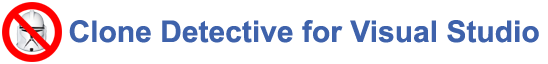
<style>
.page{position:relative;width:548px;height:64px;background:#ffffff}
.page>*{position:absolute;margin:0}
.t1{font:30px "Arial-BoldMT";color:#3e62ab}
</style>
<div class="page">
<p class="t1" style="left:69px;top:20px;width:470px;height:23px">Clone Detective for Visual Studio</p>
</div>
